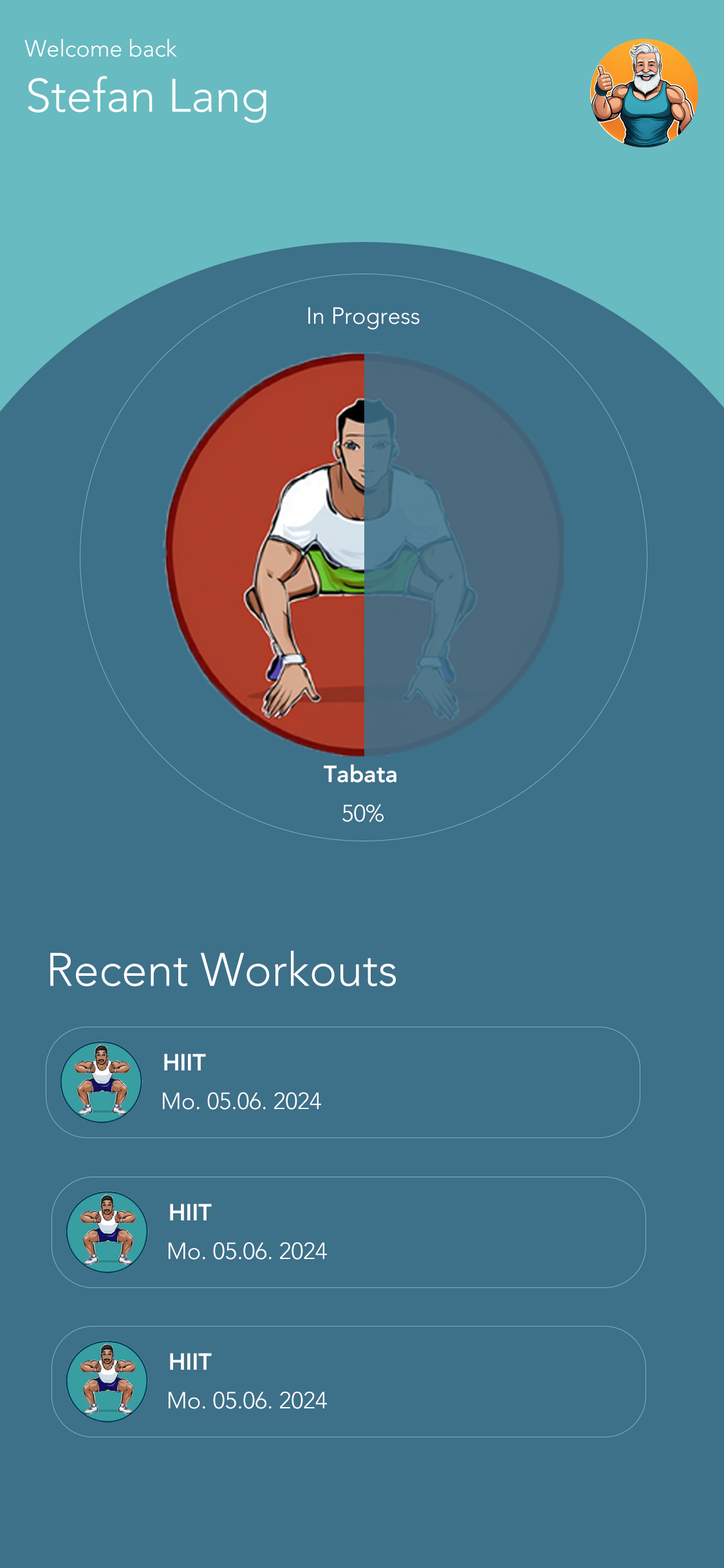
<style>
.page{position:relative;width:724px;height:1568px;background:#3d7089}
.page>*{position:absolute;margin:0}
.t1{font:23.2px "Avenir-Light";color:#ffffff}
.t2{font:46.3px "Avenir-Light";color:#ffffff}
.t3{font:23.2px "Avenir-Heavy";color:#ffffff}
</style>
<div class="page">
<p class="t1" style="left:24px;top:39px;width:153px;height:18px">Welcome back</p>
<p class="t2" style="left:28px;top:76px;width:238px;height:47px">Stefan Lang</p>
<p class="t1" style="left:308px;top:307px;width:112px;height:23px">In Progress</p>
<p class="t3" style="left:324px;top:764px;width:73px;height:19px">Tabata</p>
<p class="t1" style="left:342px;top:804px;width:42px;height:19px">50%</p>
<p class="t2" style="left:50px;top:951px;width:346px;height:36px">Recent Workouts</p>
<p class="t3" style="left:164px;top:1054px;width:42px;height:16px">HIIT</p>
<p class="t1" style="left:163px;top:1092px;width:158px;height:18px">Mo. 05.06. 2024</p>
<p class="t3" style="left:170px;top:1204px;width:42px;height:16px">HIIT</p>
<p class="t1" style="left:169px;top:1242px;width:158px;height:18px">Mo. 05.06. 2024</p>
<p class="t3" style="left:170px;top:1353px;width:42px;height:17px">HIIT</p>
<p class="t1" style="left:169px;top:1392px;width:158px;height:17px">Mo. 05.06. 2024</p>
</div>
